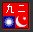
<style>
.page{position:relative;width:33px;height:32px;background:#f20000}
.page>*{position:absolute;margin:0}
.t1{font:10.4px "SimSun";color:#ffffff}
</style>
<div class="page">
<p class="t1" style="left:6px;top:4px;width:19px;height:9px">九二</p>
</div>
